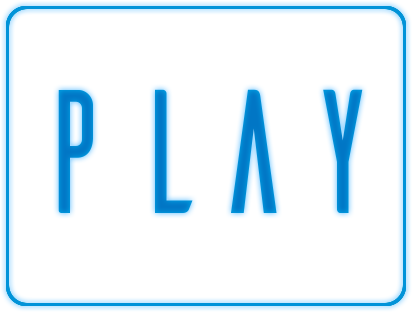
<style>
.page{position:relative;width:412px;height:312px;background:#ffffff}
.page>*{position:absolute;margin:0}
.t1{font:176px "Ailerons-Regular";color:#0176c5;scale:0.91 1}
</style>
<div class="page">
<p class="t1" style="left:58px;top:89px;width:305px;height:124px">play</p>
</div>
